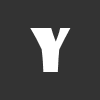
<style>
.page{position:relative;width:100px;height:100px;background:#333333}
.page>*{position:absolute;margin:0}
.t1{font:58.3px "ShowcardGothic-Reg";color:#ffffff}
</style>
<div class="page">
<p class="t1" style="left:30px;top:28px;width:41px;height:44px">y</p>
</div>
